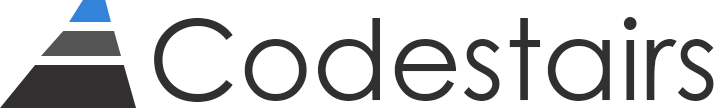
<style>
.page{position:relative;width:714px;height:108px;background:#ffffff}
.page>*{position:absolute;margin:0}
.t1{font:112.3px "CenturyGothic";color:#312f2f}
</style>
<div class="page">
<p class="t1" style="left:154px;top:17px;width:560px;height:85px">Codestairs</p>
</div>
